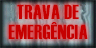
<style>
.page{position:relative;width:96px;height:48px}
.page>*{position:absolute;margin:0}
.t1{font:20.2px/20px "Haettenschweiler";letter-spacing:0.02em;color:#c60000}
</style>
<div class="page">
<p class="t1" style="left:8px;top:4px;width:80px;height:36px;text-align:center">TRAVA DE<br> EMERGÊNCIA</p>
</div>
